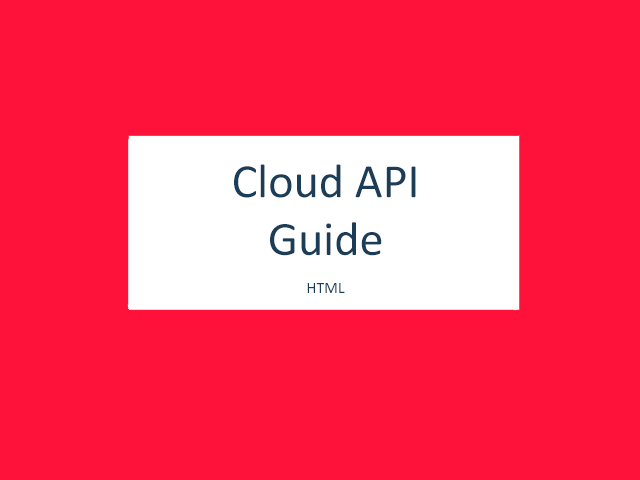
<style>
.page{position:relative;width:640px;height:480px;background:#ff1239}
.page>*{position:absolute;margin:0}
.t1{font:48px "Calibri";color:#1b3d58}
.t2{font:16px "Calibri";color:#1b3d58}
</style>
<div class="page">
<p class="t1" style="left:234px;top:164px;width:182px;height:129px;text-align:center">Cloud API<br>Guide<br><span class="t2"><br>HTML</span></p>
</div>
